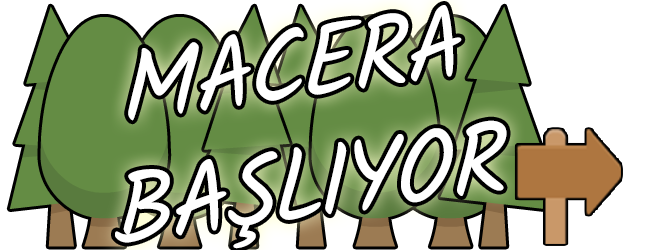
<style>
.page{position:relative;width:650px;height:250px;background:#ffffff}
.page>*{position:absolute;margin:0}
.t1{font:100px "Kalam-Regular";color:#ffffff;font-style:italic;scale:0.96 1}
</style>
<div class="page">
<p class="t1" style="left:115px;top:5px;width:392px;height:244px;text-align:center;rotate:-8deg">MACERA<br>BAŞLIYOR</p>
</div>
